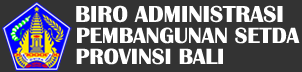
<style>
.page{position:relative;width:302px;height:72px;background:#333333}
.page>*{position:absolute;margin:0}
.t1{font:23.3px "BritannicBold";color:#ffffff}
.t2{font:22.6px "BritannicBold";color:#ffffff}
.t3{font:22.6px "BritannicBold";color:#feffff}
</style>
<div class="page">
<p class="t1" style="left:76px;top:5px;width:207px;height:18px">BIRO ADMINISTRASI</p>
<p class="t2" style="left:77px;top:27px;width:223px;height:17px">PEMBANGUNAN SETDA</p>
<p class="t3" style="left:76px;top:48px;width:147px;height:17px">PROVINSI BALI</p>
</div>
